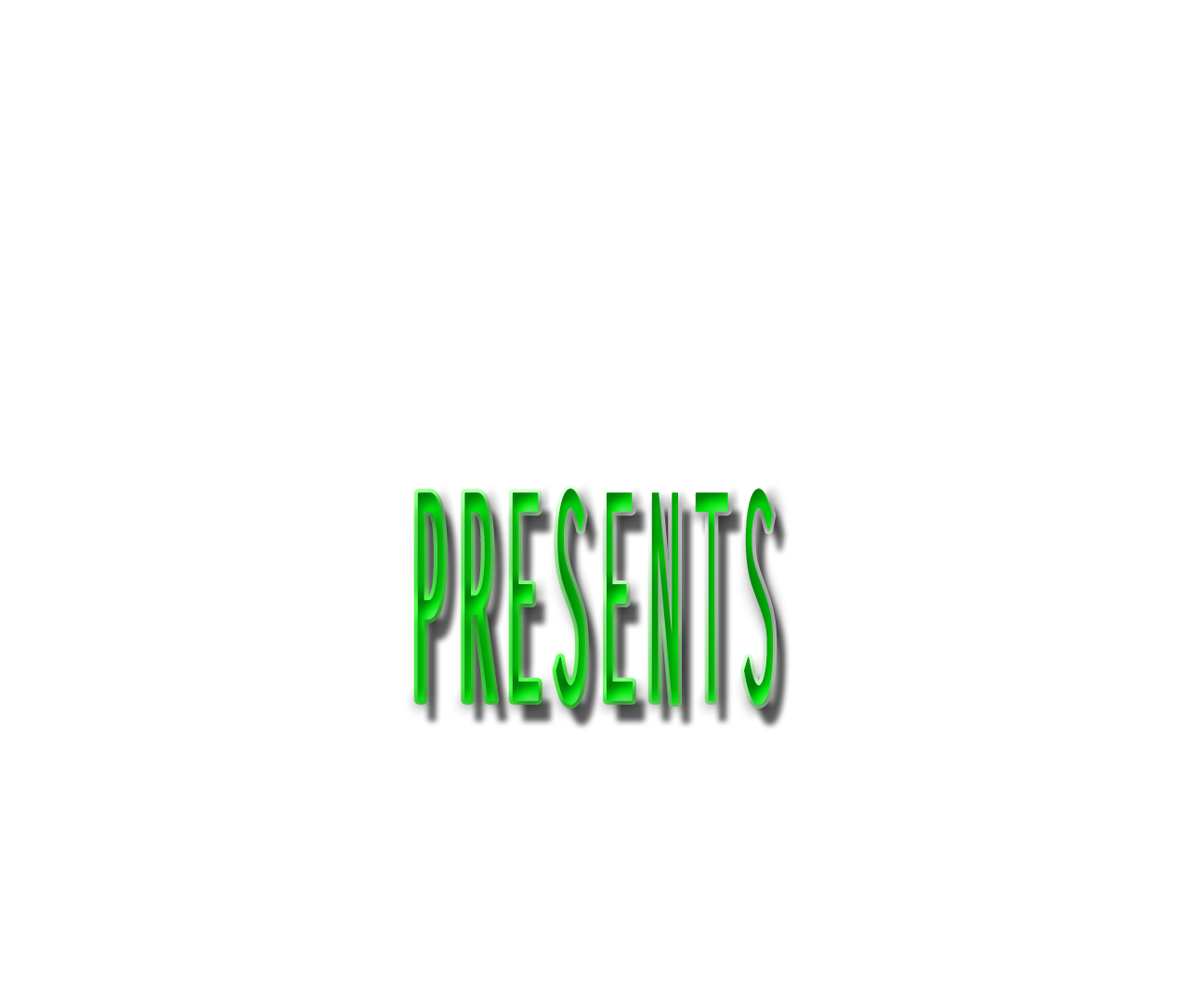
<style>
.page{position:relative;width:1189px;height:1003px;background:#ffffff}
.page>*{position:absolute;margin:0}
.t1{font:287.5px "LetterGothicStd-Bold";letter-spacing:0.1em;text-transform:uppercase;font-weight:bold;scale:0.23 1}
</style>
<div class="page">
<p class="t1" style="left:417px;top:489px;width:357px;height:216px">Presents</p>
</div>
